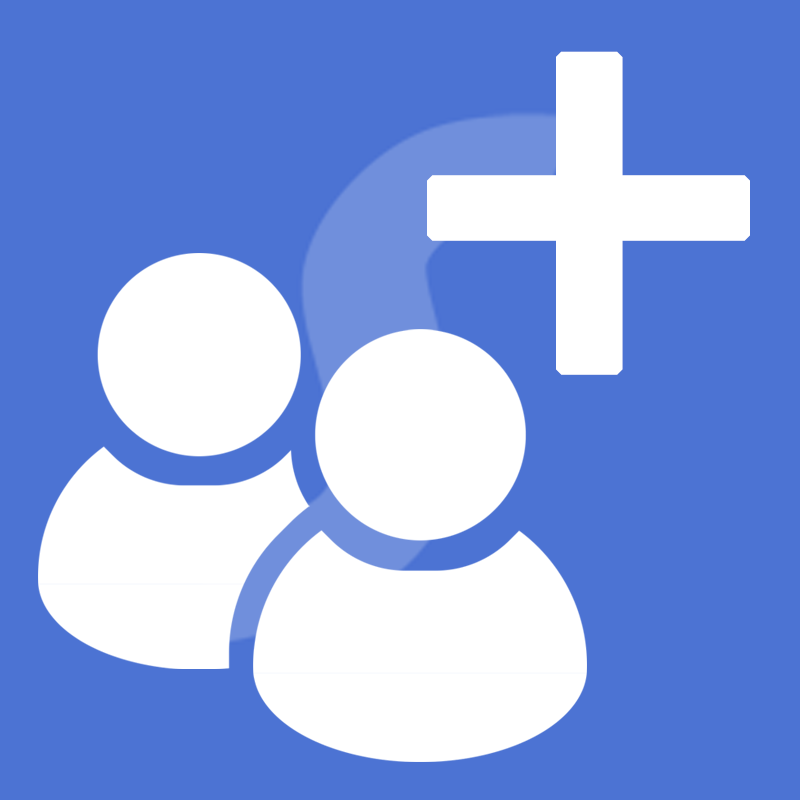
<style>
.page{position:relative;width:800px;height:800px;background:#4c73d3}
.page>*{position:absolute;margin:0}
.t1{font:400px "RuikaMonoKyohkan-06";color:#ffffff;font-weight:bold}
</style>
<div class="page">
<p class="t1" style="left:427px;top:51px;width:323px;height:324px">＋</p>
</div>
